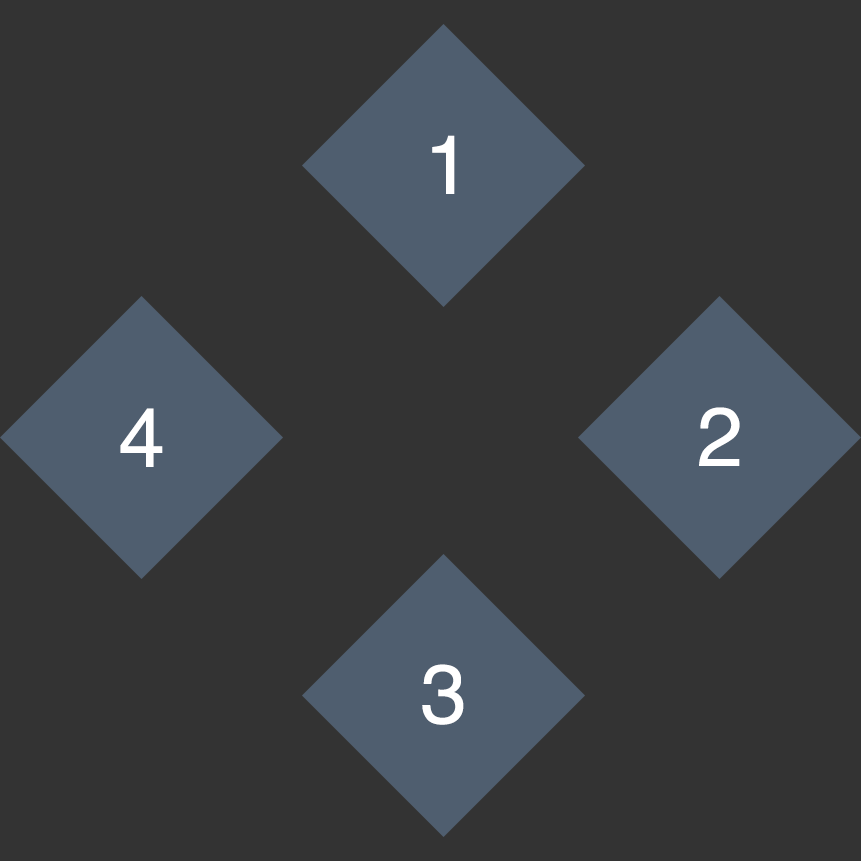
<style>
.page{position:relative;width:861px;height:861px;background:#333333}
.page>*{position:absolute;margin:0}
.t1{font:83.3px "Helvetica";color:#ffffff}
</style>
<div class="page">
<p class="t1" style="left:432px;top:135px;width:23px;height:59px">1</p>
<p class="t1" style="left:120px;top:408px;width:43px;height:59px">4</p>
<p class="t1" style="left:699px;top:407px;width:41px;height:59px">2</p>
<p class="t1" style="left:422px;top:664px;width:42px;height:61px">3</p>
</div>
